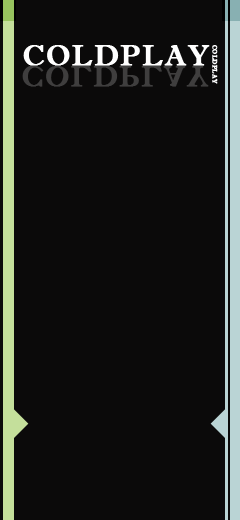
<style>
.page{position:relative;width:240px;height:520px;background:#0b0a0a}
.page>*{position:absolute;margin:0}
.t1{font:29px "ImprintMT-Shadow";letter-spacing:0.04em;color:#ffffff;font-weight:bold}
.t2{font:6px "ImprintMT-Shadow";letter-spacing:0.04em;color:#ffffff;font-weight:bold}
.t3{font:29px "ImprintMT-Shadow";letter-spacing:0.04em;color:#3f3e3e;font-weight:bold}
</style>
<div class="page">
<p class="t1" style="left:23px;top:45px;width:187px;height:21px">COLDPLAY</p>
<p class="t2" style="left:212px;top:45px;width:6px;height:39px;rotate:90deg">COLDPLAY</p>
<p class="t3" style="left:22px;top:66px;width:187px;height:21px">COLDPLAY</p>
</div>
